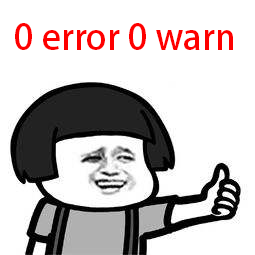
<style>
.page{position:relative;width:255px;height:255px;background:#ffffff}
.page>*{position:absolute;margin:0}
.t1{font:35px "AdobeHeitiStd-Regular";color:#fe0000}
</style>
<div class="page">
<p class="t1" style="left:15px;top:23px;width:218px;height:27px">0 error 0 warn</p>
</div>
